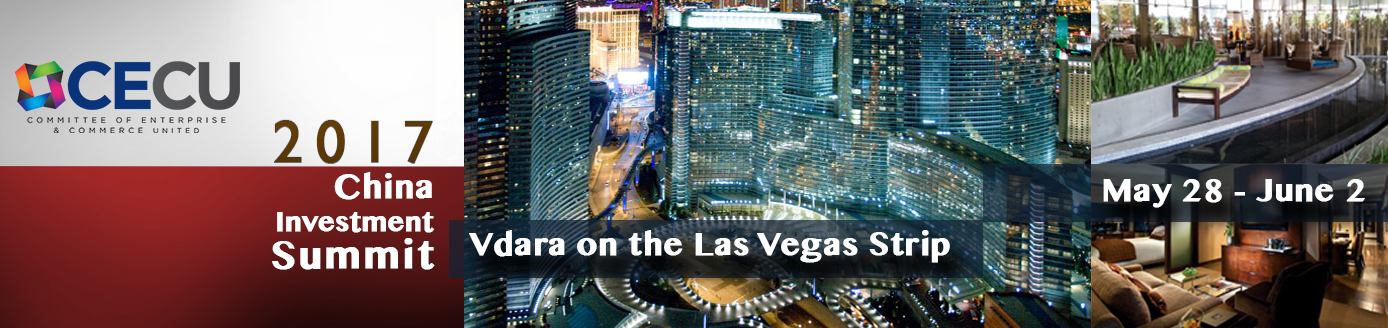
<style>
.page{position:relative;width:1388px;height:328px}
.page>*{position:absolute;margin:0}
.t1{font:28px/33px "LaoMN-Bold";letter-spacing:-0.02em;color:#ffffff;font-weight:bold}
.t2{font:60px/35px "GillSans";letter-spacing:0.2em;color:#6a9ff4;font-weight:bold}
.t3{font:33px/37px "LaoMN-Bold";color:#ffffff;font-weight:bold}
.t4{font:39px/37px "LaoMN-Bold";letter-spacing:0.04em;color:#ffffff;font-weight:bold}
.t5{font:60px "GillSans";letter-spacing:0.2em;color:#5d3a06;font-weight:bold}
.t6{font:32px "LaoMN-Bold";color:#ffffff;font-weight:bold}
</style>
<div class="page">
<p class="t1" style="left:272px;top:119px;width:163px;height:151px;text-align:right"><span class="t2">2017<br></span><span class="t3">China<br></span>Investment<br><span class="t4">Summit</span></p>
<p class="t5" style="left:274px;top:120px;width:159px;height:44px">2017</p>
<p class="t6" style="left:1103px;top:179px;width:262px;height:29px">May 28 - June 2</p>
<p class="t6" style="left:469px;top:230px;width:481px;height:33px">Vdara on the Las Vegas Strip</p>
</div>
